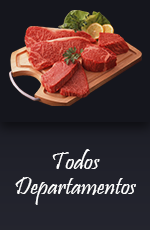
<style>
.page{position:relative;width:150px;height:230px;background:#15161d}
.page>*{position:absolute;margin:0}
.t1{font:25px/25px "Pristina-Regular";color:#082134}
</style>
<div class="page">
<p class="t1" style="left:15px;top:149px;width:121px;height:56px;text-align:center">Todos<br>Departamentos</p>
</div>
